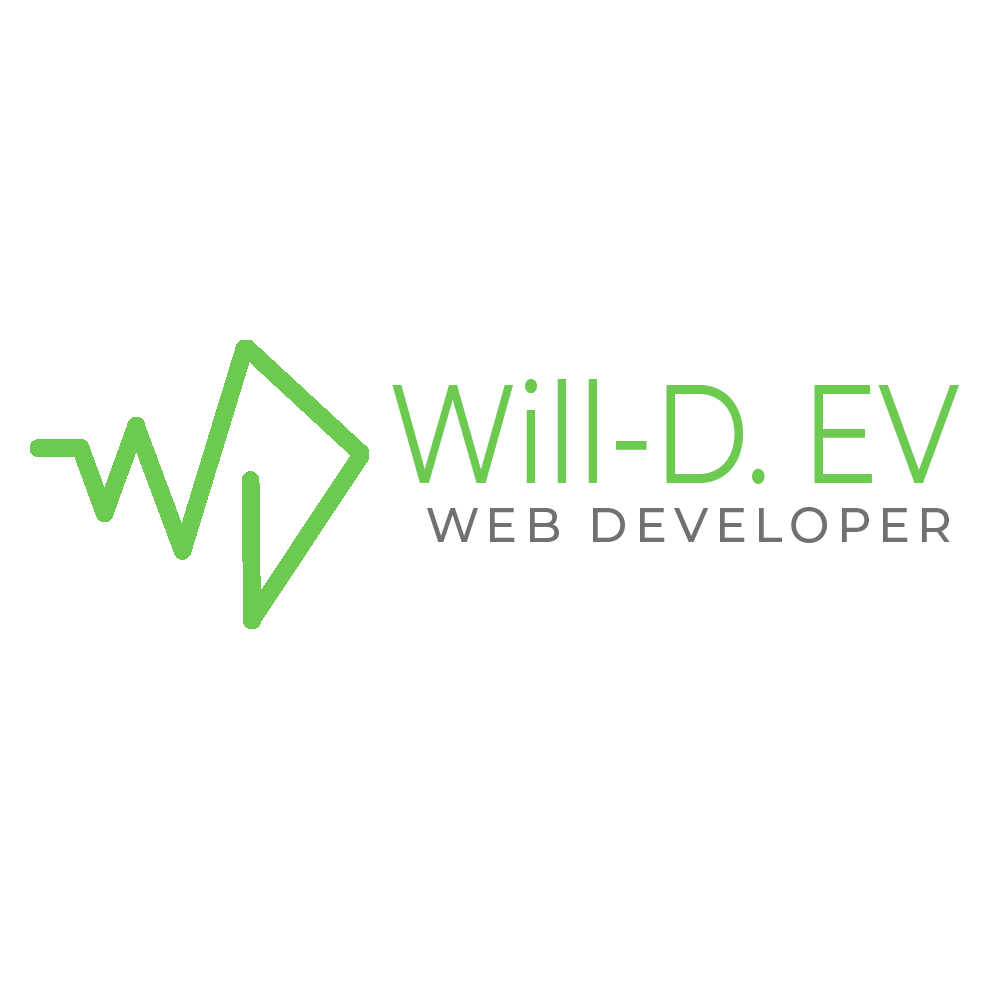
<style>
.page{position:relative;width:1000px;height:1000px;background:#ffffff}
.page>*{position:absolute;margin:0}
.t1{font:140px "Montserrat-Regular";color:#6cca51;scale:0.83 1}
.t2{font:48px "Montserrat-Medium";letter-spacing:0.15em;color:#717171}
</style>
<div class="page">
<p class="t1" style="left:392px;top:378px;width:567px;height:106px">Will-D. EV</p>
<p class="t2" style="left:427px;top:507px;width:523px;height:36px">WEB DEVELOPER</p>
</div>
